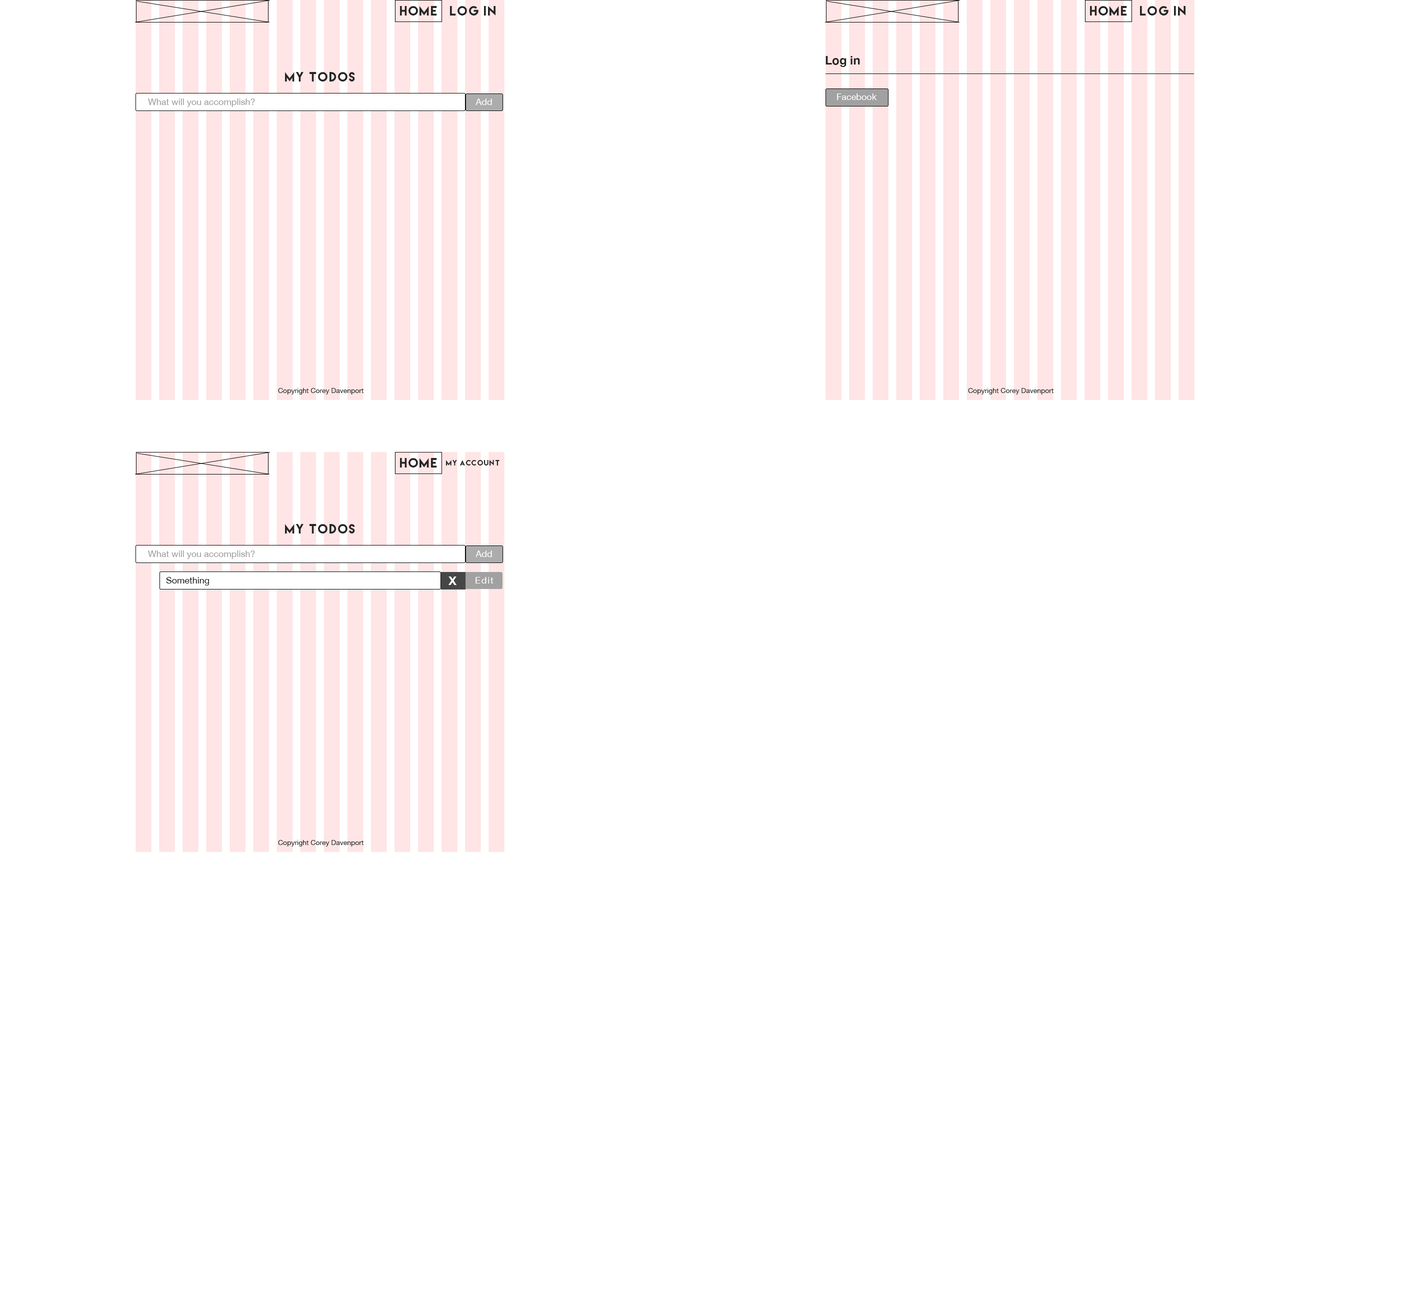
<style>
.page{position:relative;width:1408px;height:1312px;background:#ffffff}
.page>*{position:absolute;margin:0}
.t1{font:12px "LemonMilk";letter-spacing:0.1em;color:#252525}
.t2{font:12px "HelveticaNeue-Bold";color:#252525}
.t3{font:9px "HelveticaNeue";color:#9b9b9b}
.t4{font:9px "HelveticaNeue";color:#ffffff}
.t5{font:7px "HelveticaNeue";color:#252525}
.t6{font:7px "LemonMilk";letter-spacing:0.1em;color:#252525}
.t7{font:9px "HelveticaNeue";color:#0f0f0f}
.t8{font:12px "HelveticaNeue-Bold";letter-spacing:0.1em;color:#ffffff}
.t9{font:9px "HelveticaNeue";letter-spacing:0.1em;color:#ffffff}
</style>
<div class="page">
<p class="t1" style="left:400px;top:6px;width:37px;height:10px">Home</p>
<p class="t1" style="left:450px;top:6px;width:46px;height:10px">Log in</p>
<p class="t1" style="left:1090px;top:6px;width:37px;height:10px">Home</p>
<p class="t1" style="left:1140px;top:6px;width:46px;height:10px">Log in</p>
<p class="t2" style="left:826px;top:56px;width:34px;height:11px">Log in</p>
<p class="t1" style="left:285px;top:72px;width:70px;height:10px">My todos</p>
<p class="t3" style="left:148px;top:98px;width:107px;height:9px">What will you accomplish?</p>
<p class="t4" style="left:476px;top:98px;width:16px;height:7px">Add</p>
<p class="t4" style="left:837px;top:94px;width:40px;height:6px">Facebook</p>
<p class="t5" style="left:278px;top:388px;width:86px;height:6px">Copyright Corey Davenport</p>
<p class="t5" style="left:968px;top:388px;width:86px;height:6px">Copyright Corey Davenport</p>
<p class="t1" style="left:400px;top:458px;width:37px;height:10px">Home</p>
<p class="t6" style="left:446px;top:460px;width:54px;height:6px">My account</p>
<p class="t1" style="left:285px;top:524px;width:70px;height:10px">My todos</p>
<p class="t3" style="left:148px;top:550px;width:107px;height:9px">What will you accomplish?</p>
<p class="t4" style="left:476px;top:550px;width:16px;height:7px">Add</p>
<p class="t7" style="left:166px;top:577px;width:43px;height:9px">Something</p>
<p class="t8" style="left:448px;top:576px;width:9px;height:9px">X</p>
<p class="t9" style="left:476px;top:577px;width:18px;height:7px">Edit</p>
<p class="t5" style="left:278px;top:840px;width:86px;height:6px">Copyright Corey Davenport</p>
</div>
